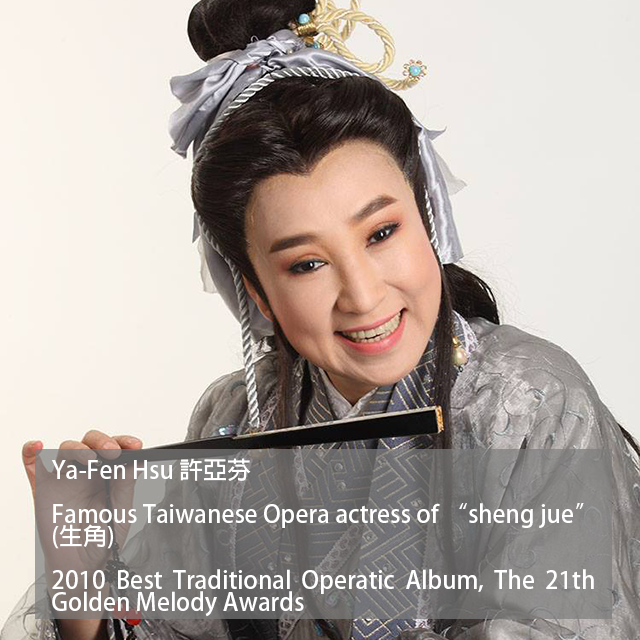
<style>
.page{position:relative;width:640px;height:640px}
.page>*{position:absolute;margin:0}
.t1{font:24px/22px "AdobeFanHeitiStd-Bold";color:#ffffff}
</style>
<div class="page">
<p class="t1" style="left:51px;top:458px;width:543px;height:159px;text-align:justify">Ya-Fen Hsu 許亞芬<br><br>Famous Taiwanese Opera actress of “sheng jue”<br>(生角)<br><br>2010 Best Traditional Operatic Album, The 21th Golden Melody Awards</p>
</div>
